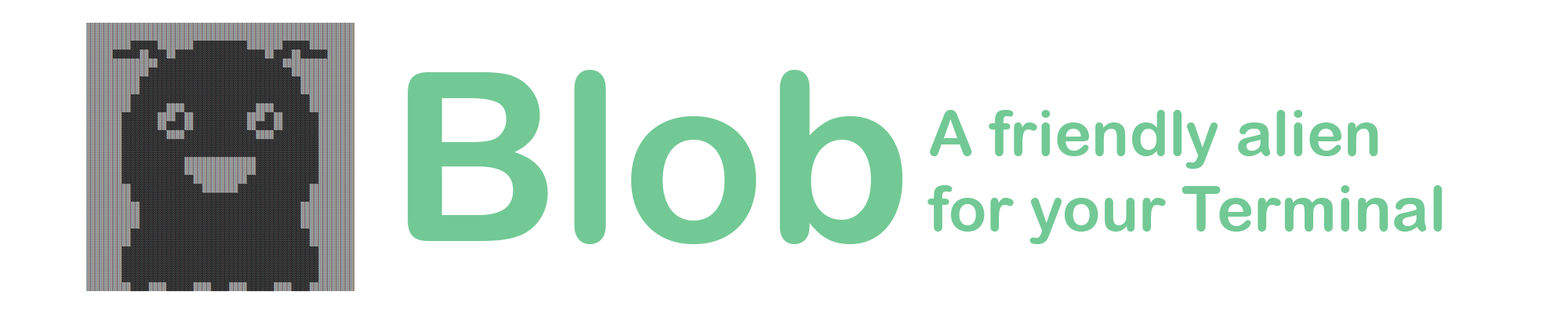
<style>
.page{position:relative;width:1568px;height:314px;background:#ffffff}
.page>*{position:absolute;margin:0}
.t1{font:235.2px "ArialRoundedMTBold";color:#72c995}
.t2{font:62.7px "ArialRoundedMTBold";color:#72c995}
</style>
<div class="page">
<p class="t1" style="left:408px;top:70px;width:495px;height:174px">Blob</p>
<p class="t2" style="left:927px;top:110px;width:516px;height:134px">A friendly alien <br>for your Terminal</p>
</div>
